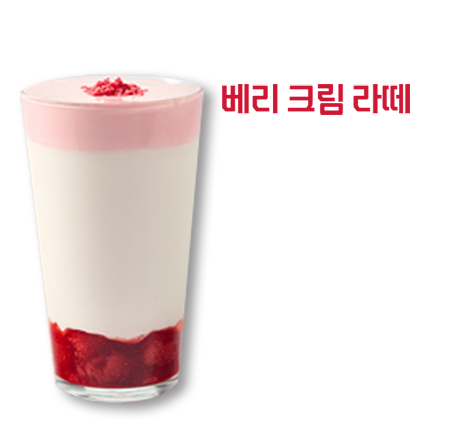
<style>
.page{position:relative;width:470px;height:442px;background:#ffffff}
.page>*{position:absolute;margin:0}
.t1{font:34px "EliceDigitalBaeum-Bd";letter-spacing:-0.05em;color:#cd1733}
</style>
<div class="page">
<p class="t1" style="left:222px;top:84px;width:188px;height:31px">베리 크림 라떼</p>
</div>
